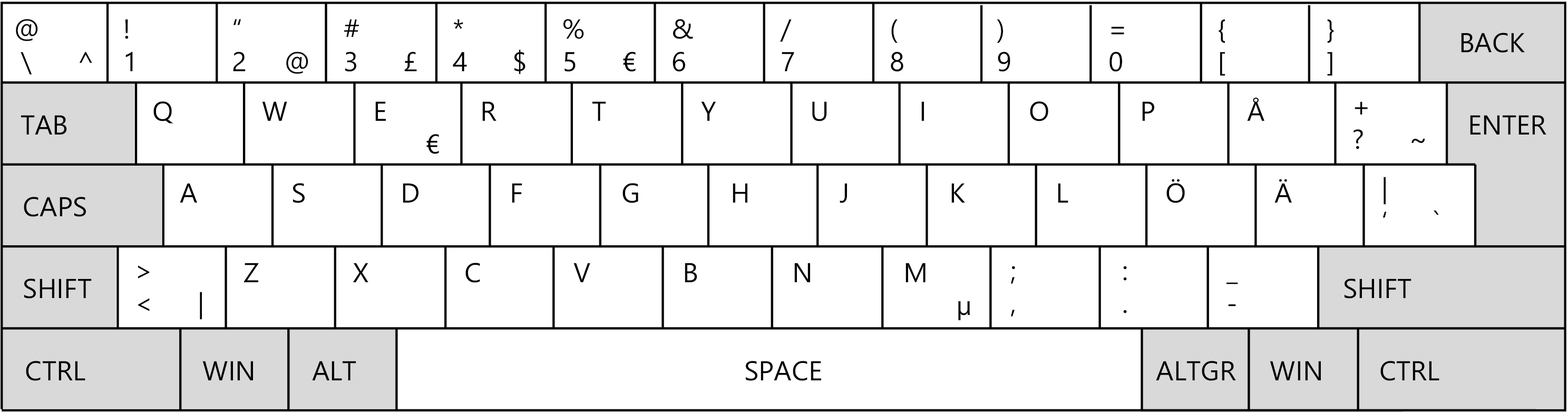
<style>
.page{position:relative;width:1568px;height:412px;background:#ffffff}
.page>*{position:absolute;margin:0}
.t1{font:27.3px "SegoeUI";color:#000000}
</style>
<div class="page">
<p class="t1" style="left:16px;top:19px;width:76px;height:55px">@<br> \      ^</p>
<p class="t1" style="left:125px;top:19px;width:8px;height:52px">!<br>1</p>
<p class="t1" style="left:233px;top:19px;width:75px;height:55px">“<br>2     @</p>
<p class="t1" style="left:344px;top:19px;width:73px;height:53px">#<br>3      £</p>
<p class="t1" style="left:453px;top:19px;width:72px;height:55px">*<br>4      $</p>
<p class="t1" style="left:563px;top:19px;width:73px;height:53px">%<br>5      €</p>
<p class="t1" style="left:673px;top:19px;width:20px;height:53px">&amp;<br>6</p>
<p class="t1" style="left:780px;top:19px;width:14px;height:52px">/<br>7</p>
<p class="t1" style="left:891px;top:19px;width:12px;height:53px">(<br>8</p>
<p class="t1" style="left:997px;top:19px;width:13px;height:53px">)<br>9</p>
<p class="t1" style="left:1109px;top:26px;width:15px;height:46px">=<br>0</p>
<p class="t1" style="left:1219px;top:19px;width:6px;height:57px">{<br>[</p>
<p class="t1" style="left:1327px;top:19px;width:7px;height:57px">}<br>]</p>
<p class="t1" style="left:1461px;top:33px;width:64px;height:20px">BACK</p>
<p class="t1" style="left:153px;top:101px;width:20px;height:22px">Q</p>
<p class="t1" style="left:262px;top:101px;width:25px;height:20px">W</p>
<p class="t1" style="left:375px;top:101px;width:64px;height:53px">E<br>       €</p>
<p class="t1" style="left:482px;top:101px;width:14px;height:20px">R</p>
<p class="t1" style="left:592px;top:101px;width:14px;height:20px">T</p>
<p class="t1" style="left:701px;top:101px;width:15px;height:20px">Y</p>
<p class="t1" style="left:812px;top:101px;width:15px;height:20px">U</p>
<p class="t1" style="left:921px;top:101px;width:3px;height:20px">I</p>
<p class="t1" style="left:1030px;top:101px;width:18px;height:20px">O</p>
<p class="t1" style="left:1142px;top:101px;width:12px;height:20px">P</p>
<p class="t1" style="left:1247px;top:98px;width:17px;height:23px">Å</p>
<p class="t1" style="left:1353px;top:102px;width:72px;height:47px">+<br>?      ~</p>
<p class="t1" style="left:21px;top:115px;width:46px;height:19px">TAB</p>
<p class="t1" style="left:1470px;top:115px;width:76px;height:19px">ENTER</p>
<p class="t1" style="left:180px;top:183px;width:17px;height:19px">A</p>
<p class="t1" style="left:293px;top:183px;width:12px;height:20px">S</p>
<p class="t1" style="left:403px;top:183px;width:15px;height:19px">D</p>
<p class="t1" style="left:512px;top:183px;width:10px;height:19px">F</p>
<p class="t1" style="left:622px;top:183px;width:16px;height:20px">G</p>
<p class="t1" style="left:733px;top:183px;width:14px;height:19px">H</p>
<p class="t1" style="left:840px;top:183px;width:7px;height:20px">J</p>
<p class="t1" style="left:951px;top:183px;width:14px;height:19px">K</p>
<p class="t1" style="left:1058px;top:183px;width:10px;height:19px">L</p>
<p class="t1" style="left:1166px;top:179px;width:19px;height:24px">Ö</p>
<p class="t1" style="left:1274px;top:179px;width:18px;height:23px">Ä</p>
<p class="t1" style="left:1382px;top:177px;width:57px;height:41px">|<br>‘      `</p>
<p class="t1" style="left:24px;top:197px;width:62px;height:20px">CAPS</p>
<p class="t1" style="left:138px;top:265px;width:64px;height:54px">&gt;<br>&lt;      |</p>
<p class="t1" style="left:244px;top:262px;width:15px;height:20px">Z</p>
<p class="t1" style="left:353px;top:262px;width:15px;height:20px">X</p>
<p class="t1" style="left:465px;top:262px;width:15px;height:21px">C</p>
<p class="t1" style="left:573px;top:262px;width:17px;height:20px">V</p>
<p class="t1" style="left:685px;top:262px;width:12px;height:20px">B</p>
<p class="t1" style="left:794px;top:262px;width:16px;height:20px">N</p>
<p class="t1" style="left:905px;top:262px;width:65px;height:58px">M<br>       µ</p>
<p class="t1" style="left:1011px;top:266px;width:4px;height:50px">;<br>,</p>
<p class="t1" style="left:1123px;top:266px;width:4px;height:47px">:<br>.</p>
<p class="t1" style="left:24px;top:278px;width:68px;height:20px">SHIFT</p>
<p class="t1" style="left:1226px;top:282px;width:12px;height:24px">_<br>-</p>
<p class="t1" style="left:1345px;top:278px;width:66px;height:20px">SHIFT</p>
<p class="t1" style="left:26px;top:361px;width:59px;height:20px">CTRL</p>
<p class="t1" style="left:202px;top:361px;width:51px;height:19px">WIN</p>
<p class="t1" style="left:312px;top:361px;width:44px;height:19px">ALT</p>
<p class="t1" style="left:746px;top:361px;width:75px;height:20px">SPACE</p>
<p class="t1" style="left:1156px;top:361px;width:80px;height:20px">ALTGR</p>
<p class="t1" style="left:1270px;top:361px;width:51px;height:19px">WIN</p>
<p class="t1" style="left:1380px;top:361px;width:59px;height:20px">CTRL</p>
</div>
